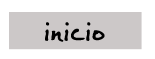
<style>
.page{position:relative;width:155px;height:59px;background:#ccc8c8}
.page>*{position:absolute;margin:0}
.t1{font:35px "BaileyMF";color:#000000;font-weight:bold}
</style>
<div class="page">
<p class="t1" style="left:45px;top:22px;width:60px;height:20px">inicio</p>
</div>
